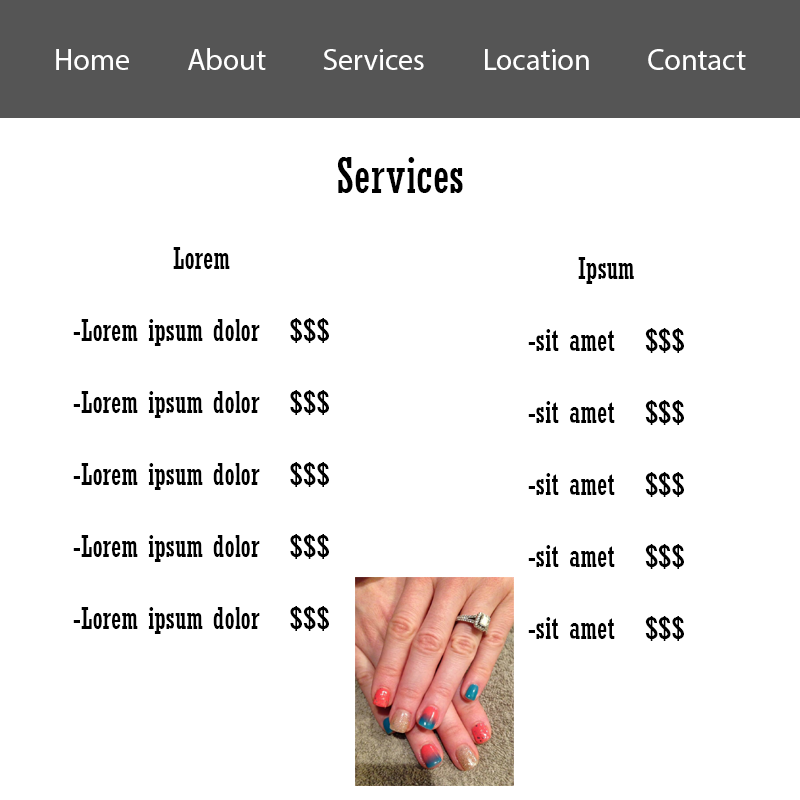
<style>
.page{position:relative;width:800px;height:800px;background:#ffffff}
.page>*{position:absolute;margin:0}
.t1{font:30px "MyriadPro-Regular";color:#ffffff}
.t2{font:48px "Rockwell-Condensed";color:#000000}
.t3{font:30px "Rockwell-Condensed";color:#000000}
</style>
<div class="page">
<p class="t1" style="left:56px;top:48px;width:690px;height:22px">Home         About         Services         Location         Contact</p>
<p class="t2" style="left:337px;top:157px;width:126px;height:36px">Services</p>
<p class="t3" style="left:73px;top:247px;width:256px;height:387px;text-align:center">Lorem<br><br>-Lorem ipsum dolor   $$$<br><br>-Lorem ipsum dolor   $$$<br><br>-Lorem ipsum dolor   $$$<br><br>-Lorem ipsum dolor   $$$<br><br>-Lorem ipsum dolor   $$$</p>
<p class="t3" style="left:528px;top:257px;width:156px;height:384px;text-align:center">Ipsum<br><br>-sit amet   $$$<br><br>-sit amet   $$$<br><br>-sit amet   $$$<br><br>-sit amet   $$$<br><br>-sit amet   $$$</p>
</div>
